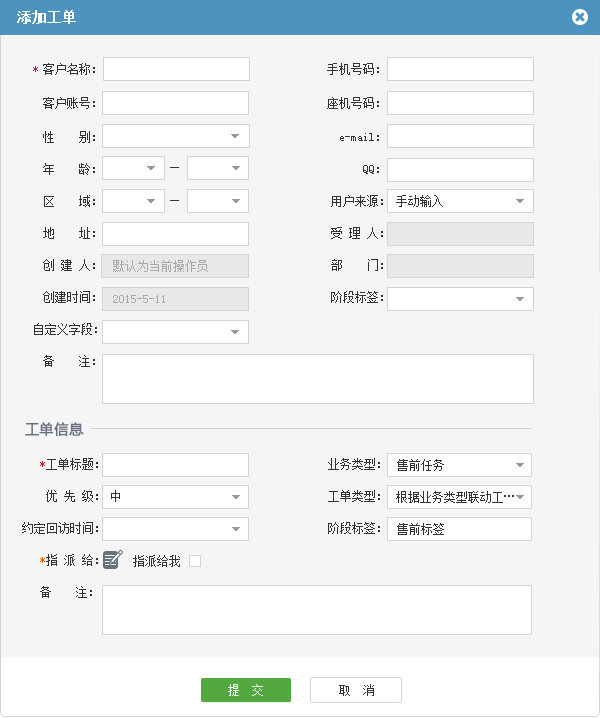
<style>
.page{position:relative;width:600px;height:718px;background:#f5f5f5}
.page>*{position:absolute;margin:0}
.t1{font:14px "SimSun";color:#ffffff;font-weight:bold}
.t2{font:12px "SimSun";color:#333333}
.t3{font:12px "SimSun";color:#c81623}
.t4{font:12px/32px "SimSun";color:#333333}
.t5{font:12px "SimSun";color:#aaaaaa}
.t6{font:14px "MicrosoftYaHei";color:#657181;font-weight:bold}
.t7{font:12px/32px "SimSun";color:#c81623}
.t8{font:12px/32px "SimSun";color:#eb6100}
.t9{font:12px "SimSun";color:#ffffff}
</style>
<div class="page">
<p class="t1" style="left:17px;top:10px;width:59px;height:14px">添加工单</p>
<p class="t2" style="left:33px;top:63px;width:62px;height:12px"><span class="t3">*</span>客户名称：</p>
<p class="t2" style="left:327px;top:63px;width:52px;height:12px">手机号码：</p>
<p class="t2" style="left:43px;top:97px;width:52px;height:12px">客户账号：</p>
<p class="t2" style="left:327px;top:97px;width:52px;height:12px">座机号码：</p>
<p class="t4" style="left:34px;top:131px;width:349px;height:204px">性　　别：                                       e-mail：<br>年　　龄：                                        　 QQ：<br>区　　域：                         　　         用户来源：<br>地　　址：                                      受 理 人：<br>创 建 人：                                      部    门：<br>创建时间：                                      阶段标签：<br>自定义字段：</p>
<p class="t2" style="left:396px;top:195px;width:47px;height:12px">手动输入</p>
<p class="t5" style="left:113px;top:260px;width:95px;height:12px">默认为当前操作员</p>
<p class="t5" style="left:113px;top:295px;width:52px;height:8px">2015-5-11</p>
<p class="t2" style="left:43px;top:355px;width:52px;height:12px">备    注：</p>
<p class="t6" style="left:25px;top:422px;width:59px;height:15px">工单信息</p>
<p class="t4" style="left:22px;top:458px;width:358px;height:108px;text-align:right"><span class="t7">*</span>工单标题：                                     业务类型：<br>优 先 级：                                     工单类型：<br>约定回访时间：　　　　　 　　　　　　　　　        阶段标签：<br><span class="t8">*</span>指 派 给：</p>
<p class="t2" style="left:397px;top:459px;width:47px;height:12px">售前任务</p>
<p class="t2" style="left:111px;top:490px;width:9px;height:12px">中</p>
<p class="t2" style="left:396px;top:491px;width:118px;height:12px">根据业务类型联动工…</p>
<p class="t2" style="left:397px;top:523px;width:47px;height:12px">售前标签</p>
<p class="t2" style="left:133px;top:555px;width:47px;height:12px">指派给我</p>
<p class="t2" style="left:40px;top:586px;width:52px;height:12px">备    注：</p>
<p class="t9" style="left:228px;top:684px;width:35px;height:12px">提　交</p>
<p class="t2" style="left:339px;top:684px;width:35px;height:12px">取  消</p>
</div>
